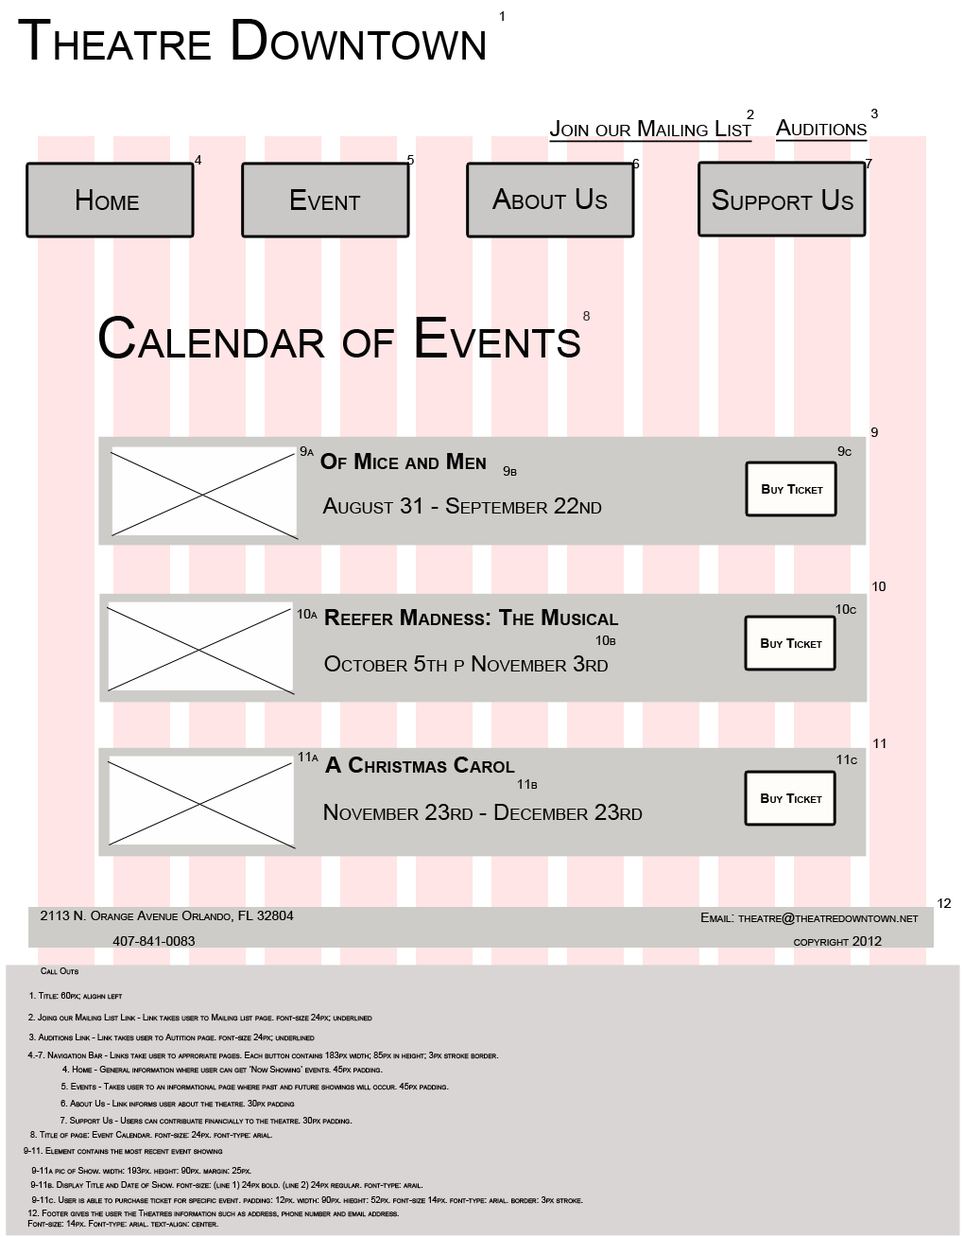
<style>
.page{position:relative;width:964px;height:1237px;background:#ffffff}
.page>*{position:absolute;margin:0}
.t1{font:13.2px "ArialMT";color:#050505;font-variant:small-caps}
.t2{font:56.7px "ArialMT";color:#030303;font-variant:small-caps}
.t3{font:22.7px "ArialMT";color:#050505;font-variant:small-caps;text-decoration:underline}
.t4{font:28.4px "ArialMT";color:#050505;font-variant:small-caps}
.t5{font:56.7px "ArialMT";color:#050505;font-variant:small-caps}
.t6{font:13.2px "ArialMT";color:#373232;font-variant:small-caps}
.t7{font:22.7px "Arial-BoldMT";color:#050505;font-variant:small-caps}
.t8{font:13.2px "Arial-BoldMT";color:#050505;font-variant:small-caps}
.t9{font:22.7px "ArialMT";color:#050505;font-variant:small-caps}
.t10{font:8.5px "ArialMT";color:#050505;font-variant:small-caps}
</style>
<div class="page">
<p class="t1" style="left:499px;top:11px;width:5px;height:10px">1</p>
<p class="t2" style="left:18px;top:19px;width:467px;height:41px">Theatre Downtown</p>
<p class="t1" style="left:747px;top:110px;width:7px;height:9px">2</p>
<p class="t1" style="left:872px;top:109px;width:6px;height:9px">3</p>
<p class="t3" style="left:549px;top:120px;width:204px;height:23px">Join our Mailing List</p>
<p class="t3" style="left:776px;top:119px;width:92px;height:23px">Auditions</p>
<p class="t1" style="left:195px;top:155px;width:7px;height:9px">4</p>
<p class="t1" style="left:407px;top:155px;width:7px;height:9px">5</p>
<p class="t1" style="left:632px;top:159px;width:8px;height:9px">6</p>
<p class="t1" style="left:866px;top:159px;width:7px;height:9px">7</p>
<p class="t4" style="left:77px;top:189px;width:62px;height:21px">Home</p>
<p class="t4" style="left:291px;top:189px;width:70px;height:21px">Event</p>
<p class="t4" style="left:492px;top:188px;width:116px;height:21px">About Us</p>
<p class="t4" style="left:712px;top:189px;width:142px;height:21px">Support Us</p>
<p class="t5" style="left:99px;top:316px;width:481px;height:42px">Calendar of Events</p>
<p class="t6" style="left:583px;top:311px;width:7px;height:9px">8</p>
<p class="t1" style="left:872px;top:427px;width:6px;height:10px">9</p>
<p class="t1" style="left:300px;top:446px;width:14px;height:10px">9a</p>
<p class="t1" style="left:838px;top:446px;width:14px;height:10px">9c</p>
<p class="t7" style="left:320px;top:453px;width:166px;height:16px">Of Mice and Men</p>
<p class="t1" style="left:503px;top:466px;width:14px;height:10px">9b</p>
<p class="t8" style="left:762px;top:484px;width:61px;height:9px">Buy Ticket</p>
<p class="t9" style="left:322px;top:497px;width:280px;height:16px">August 31 - September 22nd</p>
<p class="t1" style="left:873px;top:581px;width:13px;height:10px">10</p>
<p class="t1" style="left:836px;top:604px;width:21px;height:10px">10c</p>
<p class="t1" style="left:297px;top:609px;width:21px;height:9px">10a</p>
<p class="t7" style="left:325px;top:609px;width:294px;height:16px">Reefer Madness: The Musical</p>
<p class="t1" style="left:596px;top:635px;width:20px;height:10px">10b</p>
<p class="t8" style="left:761px;top:638px;width:61px;height:10px">Buy Ticket</p>
<p class="t9" style="left:324px;top:655px;width:284px;height:16px">October 5th p November 3rd</p>
<p class="t1" style="left:874px;top:738px;width:12px;height:10px">11</p>
<p class="t1" style="left:298px;top:752px;width:21px;height:9px">11a</p>
<p class="t7" style="left:325px;top:756px;width:190px;height:16px">A Christmas Carol</p>
<p class="t1" style="left:837px;top:754px;width:20px;height:10px">11c</p>
<p class="t1" style="left:517px;top:779px;width:21px;height:9px">11b</p>
<p class="t8" style="left:761px;top:793px;width:61px;height:10px">Buy Ticket</p>
<p class="t9" style="left:324px;top:804px;width:319px;height:16px">November 23rd - December 23rd</p>
<p class="t1" style="left:938px;top:898px;width:13px;height:10px">12</p>
<p class="t1" style="left:41px;top:910px;width:253px;height:12px">2113 N. Orange Avenue Orlando, FL 32804</p>
<p class="t1" style="left:701px;top:912px;width:218px;height:13px">Email: theatre@theatredowntown.net</p>
<p class="t1" style="left:113px;top:936px;width:82px;height:9px">407-841-0083</p>
<p class="t1" style="left:794px;top:936px;width:88px;height:9px">copyright 2012</p>
<p class="t10" style="left:41px;top:967px;width:37px;height:8px">Call Outs</p>
<p class="t10" style="left:29px;top:992px;width:94px;height:7px">1. Title: 60px; alighn left</p>
<p class="t10" style="left:28px;top:1013px;width:344px;height:8px">2. Joing our Mailing List Link - Link takes user to Mailing list page. font-size 24px; underlined</p>
<p class="t10" style="left:29px;top:1033px;width:286px;height:8px">3. Auditions Link - Link takes user to Autition page. font-size 24px; underlined</p>
<p class="t10" style="left:27px;top:1051px;width:472px;height:8px">4.-7. Navigation Bar - Links take user to approriate pages. Each button contains 183px width; 85px in height; 3px stroke border.</p>
<p class="t10" style="left:62px;top:1065px;width:321px;height:8px">4. Home - General information where user can get ‘Now Showing’ events. 45px padding.</p>
<p class="t10" style="left:61px;top:1082px;width:388px;height:8px">5. Events - Takes user to an informational page where past and future showings will occur. 45px padding.</p>
<p class="t10" style="left:61px;top:1099px;width:234px;height:8px">6. About Us - Link informs user about the theatre. 30px padding</p>
<p class="t10" style="left:61px;top:1117px;width:292px;height:7px">7. Support Us - Users can contribuate financially to the theatre. 30px padding.</p>
<p class="t10" style="left:30px;top:1131px;width:242px;height:7px">8. Title of page: Event Calendar. font-size: 24px. font-type: arial.</p>
<p class="t10" style="left:24px;top:1147px;width:199px;height:7px">9-11. Element contains the most recent event showing</p>
<p class="t10" style="left:31px;top:1167px;width:220px;height:7px">9-11a pic of Show. width: 193px. height: 90px. margin: 25px.</p>
<p class="t10" style="left:30px;top:1181px;width:394px;height:8px">9-11b. Display Title and Date of Show. font-size: (line 1) 24px bold. (line 2) 24px regular. font-type: arail.</p>
<p class="t10" style="left:32px;top:1196px;width:551px;height:7px">9-11c. User is able to purchase ticket for specific event. padding: 12px. width: 90px. hieght: 52px. font-size 14px. font-type: arial. border: 3px stroke.</p>
<p class="t10" style="left:27px;top:1209px;width:372px;height:18px">12. Footer gives the user the Theatres information such as address, phone number and email address. <br>Font-size: 14px. Font-type: arial. text-align: center.</p>
</div>
